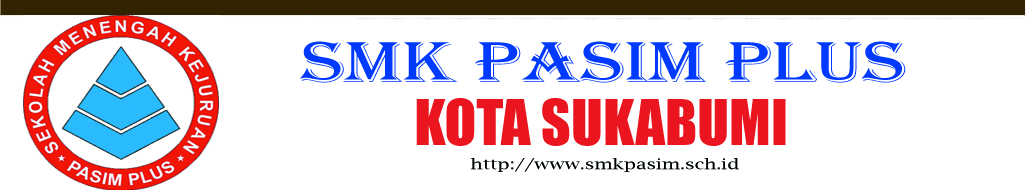
<style>
.page{position:relative;width:1026px;height:190px;background:#ffffff}
.page>*{position:absolute;margin:0}
.t1{font:59.1px "Algerian";color:#0039ff;scale:1.33 1}
.t2{font:58.3px "Impact";color:#eb151e}
.t3{font:14.7px "LucidaBright";color:#000000;scale:1.29 1}
</style>
<div class="page">
<p class="t1" style="left:300px;top:41px;width:606px;height:42px">SMK PASIM PLUS</p>
<p class="t2" style="left:416px;top:98px;width:370px;height:48px">KOTA SUKABUMI</p>
<p class="t3" style="left:470px;top:158px;width:269px;height:14px">http://www.smkpasim.sch.id</p>
</div>
